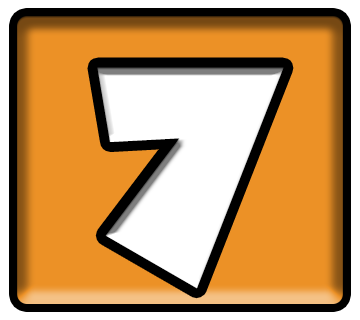
<style>
.page{position:relative;width:360px;height:320px;background:#ec9126}
.page>*{position:absolute;margin:0}
.t1{font:324.4px "Funhouse";color:#ffffff;scale:0.91 1}
</style>
<div class="page">
<p class="t1" style="left:97px;top:67px;width:187px;height:222px;rotate:5deg">7</p>
</div>
